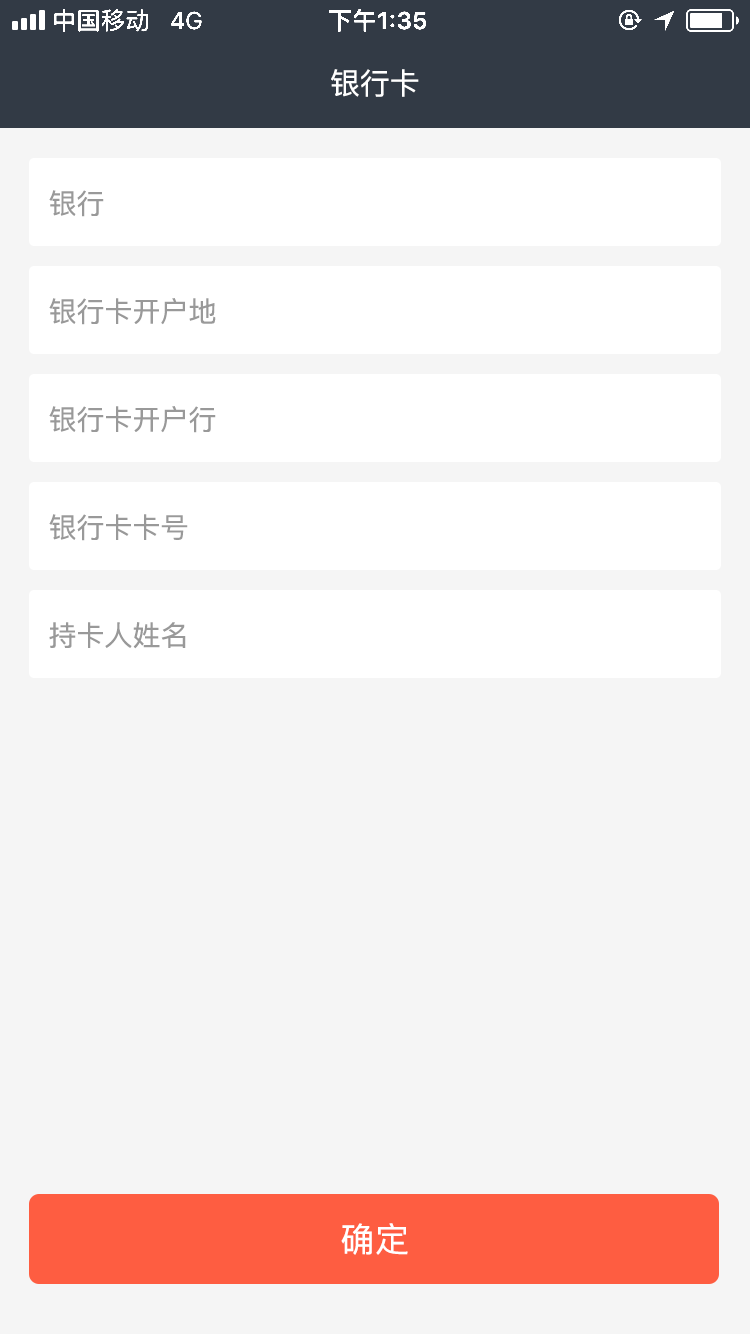
<style>
.page{position:relative;width:750px;height:1334px;background:#f5f5f5}
.page>*{position:absolute;margin:0}
.t1{font:30px "PingFang-SC-Medium";color:#ffffff}
.t2{font:28px "PingFang-SC-Medium";color:#999999}
.t3{font:34px "PingFang-SC-Medium";letter-spacing:0.02em;color:#ffffff}
</style>
<div class="page">
<p class="t1" style="left:331px;top:69px;width:88px;height:28px">银行卡</p>
<p class="t2" style="left:49px;top:190px;width:55px;height:27px">银行</p>
<p class="t2" style="left:49px;top:298px;width:167px;height:27px">银行卡开户地</p>
<p class="t2" style="left:49px;top:406px;width:167px;height:27px">银行卡开户行</p>
<p class="t2" style="left:49px;top:514px;width:139px;height:27px">银行卡卡号</p>
<p class="t2" style="left:49px;top:622px;width:137px;height:27px">持卡人姓名</p>
<p class="t3" style="left:341px;top:1223px;width:67px;height:32px">确定</p>
</div>
